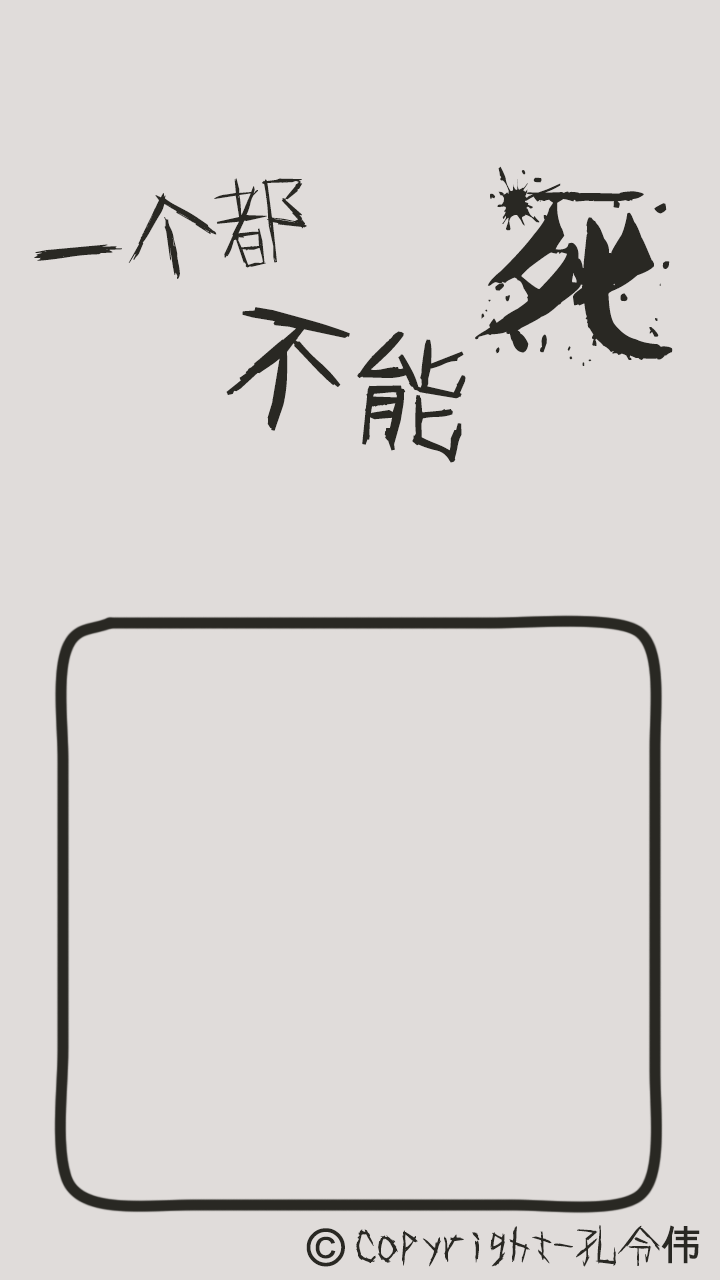
<style>
.page{position:relative;width:720px;height:1280px;background:#e0dcda}
.page>*{position:absolute;margin:0}
.t1{font:213.4px "yegenyoufont";color:#292823}
.t2{font:91.9px "onryou";color:#292823;font-weight:bold}
.t3{font:122.6px "onryou";color:#292823;font-weight:bold}
.t4{font:51.1px "ArialUnicodeMS";color:#292823;font-weight:bold}
.t5{font:41.7px "onryou";color:#292823;font-weight:bold}
.t6{font:41.7px "ArialUnicodeMS";color:#292823;font-weight:bold}
</style>
<div class="page">
<p class="t1" style="left:475px;top:166px;width:198px;height:200px;rotate:4deg">死</p>
<p class="t2" style="left:34px;top:178px;width:273px;height:101px;rotate:-11deg">一个都</p>
<p class="t3" style="left:226px;top:307px;width:240px;height:156px;rotate:10deg">不能</p>
<p class="t4" style="left:306px;top:1228px;width:39px;height:39px">©</p>
<p class="t5" style="left:356px;top:1225px;width:344px;height:42px">Copyright-孔令<span class="t6">伟</span></p>
</div>
